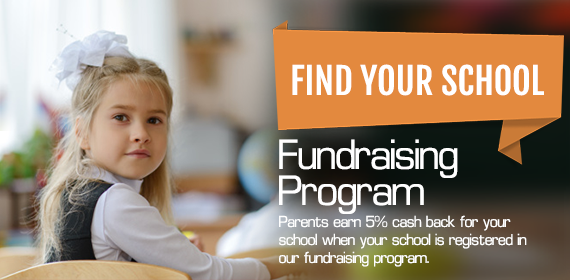
<style>
.page{position:relative;width:570px;height:280px}
.page>*{position:absolute;margin:0}
.t1{font:36px "FjallaOne-Regular";color:#ffffff}
.t2{font:48px/36px "EuroStyleNormal";color:#ffffff}
.t3{font:18px/18px "EuroStyleNormal";color:#ffffff}
</style>
<div class="page">
<p class="t1" style="left:292px;top:64px;width:252px;height:32px">FIND YOUR SCHOOL</p>
<p class="t2" style="left:279px;top:139px;width:179px;height:75px">Fundraising<br>Program</p>
<p class="t3" style="left:279px;top:215px;width:248px;height:52px">Parents earn 5% cash back for your <br>school when your school is registered in <br>our fundraising program.</p>
</div>
